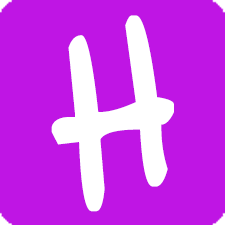
<style>
.page{position:relative;width:225px;height:225px;background:#bf15e4}
.page>*{position:absolute;margin:0}
.t1{font:337.7px "CompleteinHim";letter-spacing:0.068em;color:#ffffff;scale:0.85 1}
</style>
<div class="page">
<p class="t1" style="left:51px;top:15px;width:123px;height:197px">H</p>
</div>
